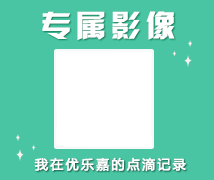
<style>
.page{position:relative;width:214px;height:180px;background:#49c5a4}
.page>*{position:absolute;margin:0}
.t1{font:30px "HYk2gj";letter-spacing:0.15em;color:#ffffff}
.t2{font:13px "MicrosoftYaHei";letter-spacing:0.15em;color:#ffffff;font-weight:bold}
</style>
<div class="page">
<p class="t1" style="left:42px;top:11px;width:133px;height:29px">专属影像</p>
<p class="t2" style="left:34px;top:157px;width:152px;height:15px">我在优乐嘉的点滴记录</p>
</div>
